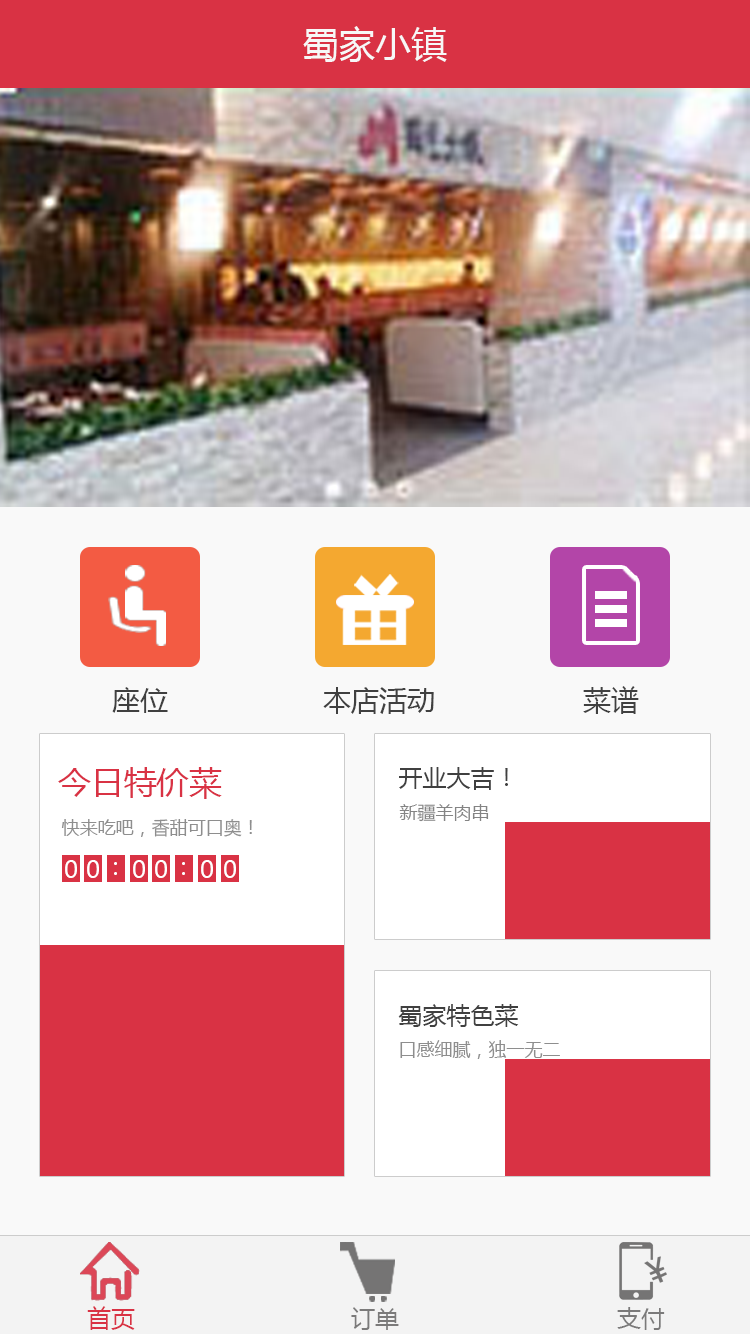
<style>
.page{position:relative;width:750px;height:1334px;background:#f9f9f9}
.page>*{position:absolute;margin:0}
.t1{font:36px "MicrosoftYaHei";color:#f7f7f7}
.t2{font:28px "MicrosoftYaHei";color:#404040}
.t3{font:32.4px "MicrosoftYaHei";color:#d93244}
.t4{font:24px "MicrosoftYaHei";color:#404040}
.t5{font:18px "MicrosoftYaHei";color:#848484}
.t6{font:18px "MicrosoftYaHei";color:#8e8e8e}
.t7{font:24px "MicrosoftYaHei";color:#ffffff}
.t8{font:24px "MicrosoftYaHei";color:#d93244}
.t9{font:24px "MicrosoftYaHei";color:#7b7a7a}
</style>
<div class="page">
<p class="t1" style="left:303px;top:26px;width:144px;height:36px">蜀家小镇</p>
<p class="t2" style="left:112px;top:687px;width:56px;height:26px">座位</p>
<p class="t2" style="left:323px;top:687px;width:111px;height:27px">本店活动</p>
<p class="t2" style="left:583px;top:686px;width:56px;height:28px">菜谱</p>
<p class="t3" style="left:58px;top:767px;width:164px;height:32px">今日特价菜</p>
<p class="t4" style="left:399px;top:767px;width:109px;height:23px">开业大吉！</p>
<p class="t5" style="left:399px;top:804px;width:90px;height:18px">新疆羊肉串</p>
<p class="t6" style="left:61px;top:819px;width:191px;height:18px">快来吃吧，香甜可口奥！</p>
<p class="t7" style="left:65px;top:860px;width:12px;height:18px">0</p>
<p class="t7" style="left:87px;top:860px;width:12px;height:18px">0</p>
<p class="t7" style="left:114px;top:862px;width:3px;height:13px">：</p>
<p class="t7" style="left:133px;top:860px;width:12px;height:18px">0</p>
<p class="t7" style="left:155px;top:860px;width:12px;height:18px">0</p>
<p class="t7" style="left:182px;top:862px;width:3px;height:13px">：</p>
<p class="t7" style="left:201px;top:860px;width:12px;height:18px">0</p>
<p class="t7" style="left:224px;top:860px;width:12px;height:18px">0</p>
<p class="t4" style="left:398px;top:1004px;width:121px;height:23px">蜀家特色菜</p>
<p class="t6" style="left:400px;top:1040px;width:160px;height:19px">口感细腻，独一无二</p>
<p class="t8" style="left:87px;top:1306px;width:48px;height:24px">首页</p>
<p class="t9" style="left:351px;top:1307px;width:48px;height:23px">订单</p>
<p class="t9" style="left:617px;top:1307px;width:48px;height:23px">支付</p>
</div>
